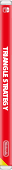
<style>
.page{position:relative;width:12px;height:170px}
.page>*{position:absolute;margin:0}
.t1{font:6.7px "MyriadPro-Bold";color:#ffffff}
</style>
<div class="page">
<p class="t1" style="left:3px;top:46px;width:5px;height:65px;rotate:90deg">TRIANGLE STRATEGY</p>
</div>
